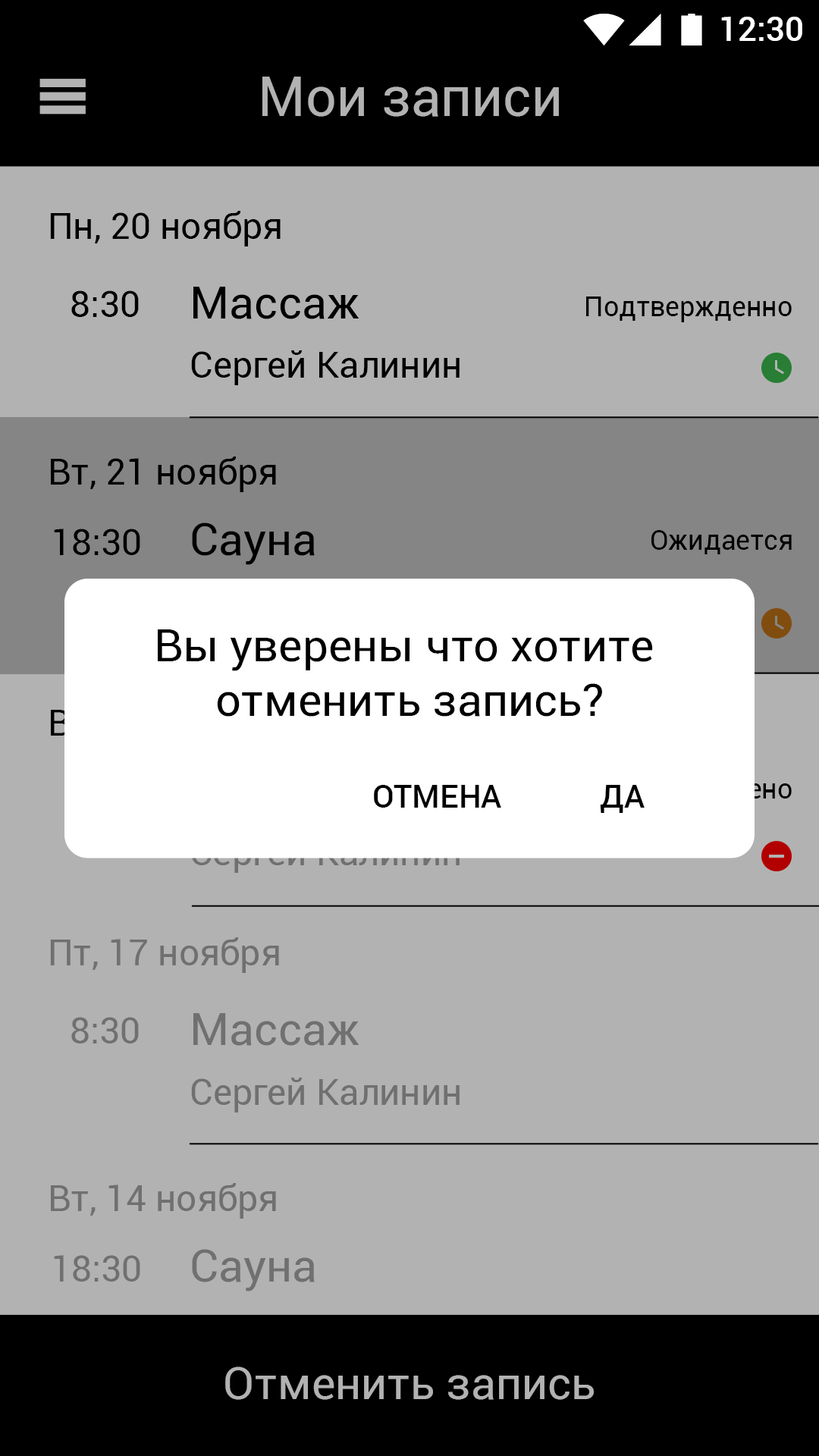
<style>
.page{position:relative;width:819px;height:1456px;background:#b2b2b2}
.page>*{position:absolute;margin:0}
.t1{font:33.4px "Roboto-Medium";color:#ffffff}
.t2{font:54.6px "Roboto-Regular";color:#b2b2b2}
.t3{font:36.4px "Roboto-Regular";color:#000000}
.t4{font:45.5px "Roboto-Regular";color:#000000}
.t5{font:27.3px "Roboto-Regular";color:#000000}
.t6{font:31.8px "Roboto-Medium";color:#000000}
.t7{font:36.4px "Roboto-Regular";color:#707070}
.t8{font:45.5px "Roboto-Regular";color:#707070}
.t9{font:45.5px "Roboto-Regular";color:#b2b2b2}
</style>
<div class="page">
<p class="t1" style="left:721px;top:17px;width:81px;height:24px">12:30</p>
<p class="t1" style="left:721px;top:17px;width:81px;height:24px">12:30</p>
<p class="t2" style="left:262px;top:77px;width:297px;height:40px">Мои записи</p>
<p class="t3" style="left:50px;top:211px;width:231px;height:35px">Пн, 20 ноября</p>
<p class="t3" style="left:71px;top:290px;width:68px;height:27px">8:30</p>
<p class="t4" style="left:193px;top:287px;width:166px;height:32px">Массаж</p>
<p class="t5" style="left:586px;top:297px;width:206px;height:25px">Подтвержденно</p>
<p class="t3" style="left:191px;top:350px;width:269px;height:35px">Сергей Калинин</p>
<p class="t3" style="left:51px;top:457px;width:225px;height:35px">Вт, 21 ноября</p>
<p class="t3" style="left:54px;top:529px;width:86px;height:26px">18:30</p>
<p class="t4" style="left:192px;top:522px;width:123px;height:43px">Сауна</p>
<p class="t5" style="left:651px;top:530px;width:141px;height:24px">Ожидается</p>
<p class="t4" style="left:158px;top:629px;width:495px;height:88px;text-align:center">Вы уверены что хотите <br>отменить запись?</p>
<p class="t6" style="left:374px;top:785px;width:127px;height:23px">ОТМЕНА</p>
<p class="t6" style="left:600px;top:785px;width:45px;height:28px">ДА</p>
<p class="t7" style="left:50px;top:937px;width:229px;height:36px">Пт, 17 ноября</p>
<p class="t8" style="left:193px;top:1013px;width:166px;height:33px">Массаж</p>
<p class="t7" style="left:71px;top:1017px;width:68px;height:26px">8:30</p>
<p class="t7" style="left:191px;top:1078px;width:269px;height:34px">Сергей Калинин</p>
<p class="t7" style="left:51px;top:1183px;width:225px;height:36px">Вт, 14 ноября</p>
<p class="t8" style="left:192px;top:1249px;width:123px;height:42px">Сауна</p>
<p class="t7" style="left:54px;top:1255px;width:86px;height:27px">18:30</p>
<p class="t9" style="left:225px;top:1366px;width:369px;height:34px">Отменить запись</p>
</div>
